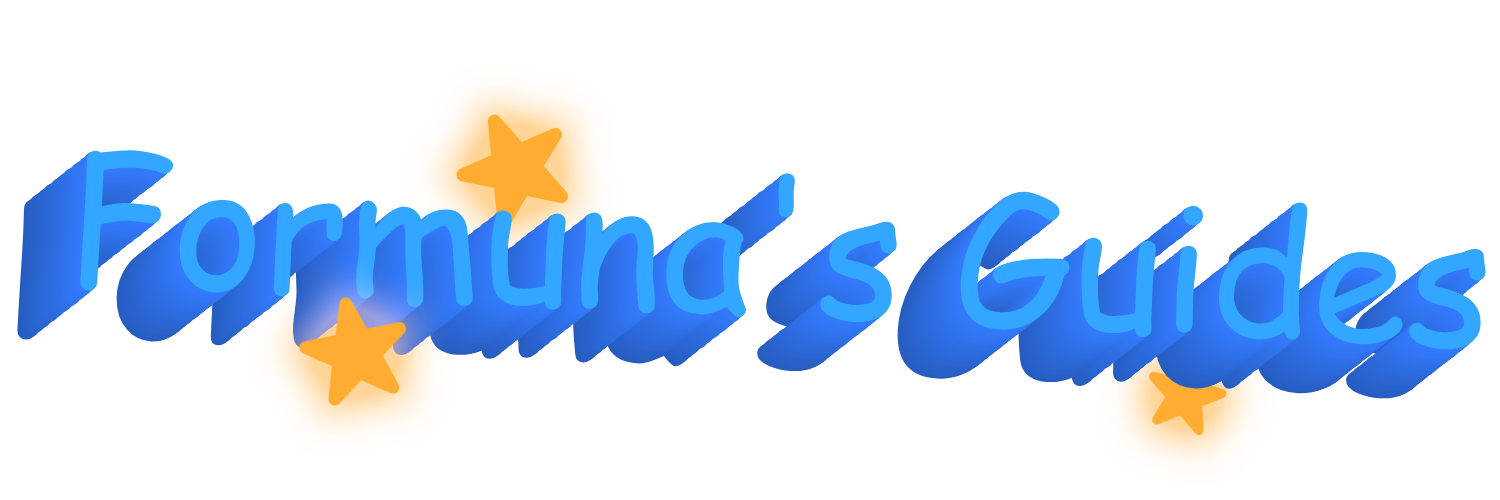
<style>
.page{position:relative;width:1500px;height:500px;background:#ffffff}
.page>*{position:absolute;margin:0}
.t1{font:173.3px "ComicSansMS";color:#33a6ff}
</style>
<div class="page">
<p class="t1" style="left:80px;top:150px;width:1406px;height:200px;rotate:3deg">Formuna's Guides</p>
</div>
